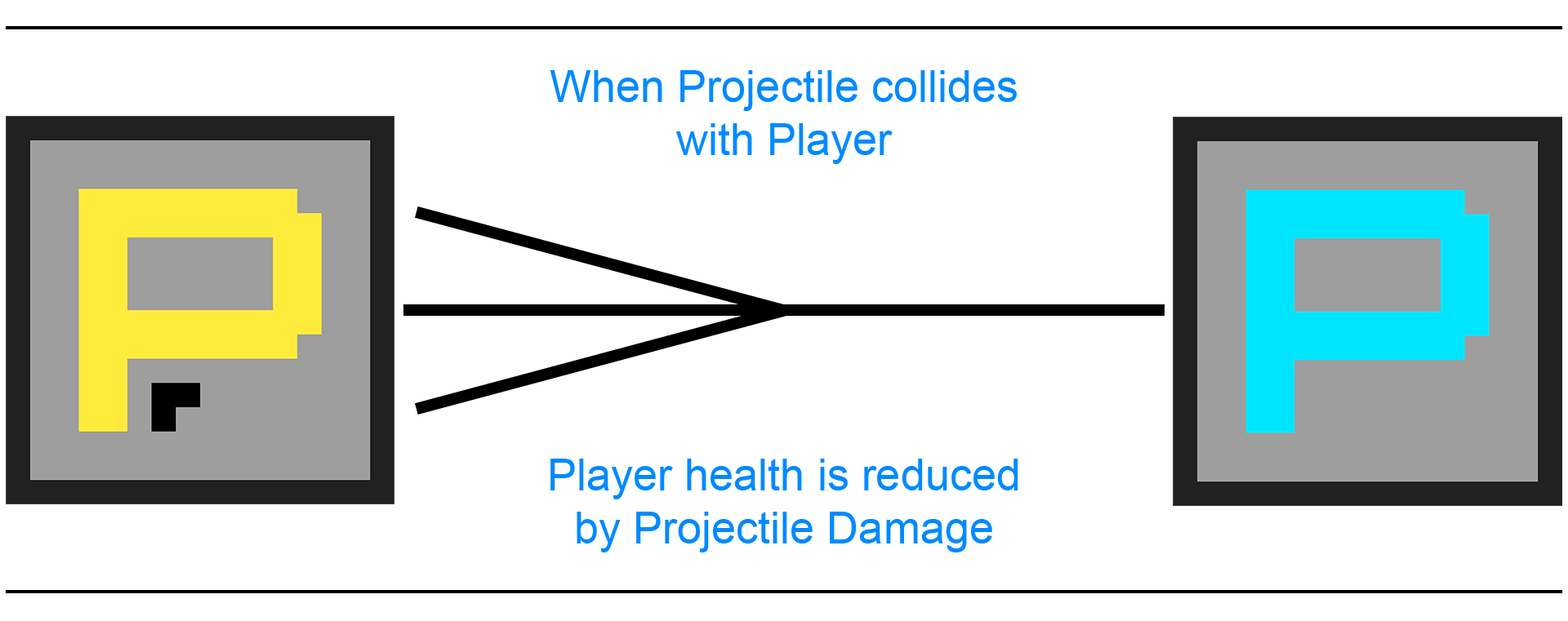
<style>
.page{position:relative;width:1568px;height:621px;background:#ffffff}
.page>*{position:absolute;margin:0}
.t1{font:44.1px "ArialMT";color:#008aff}
</style>
<div class="page">
<p class="t1" style="left:550px;top:70px;width:467px;height:94px;text-align:center">When Projectile collides<br>with Player</p>
<p class="t1" style="left:550px;top:459px;width:468px;height:94px;text-align:center">Player health is reduced<br>by Projectile Damage</p>
</div>
